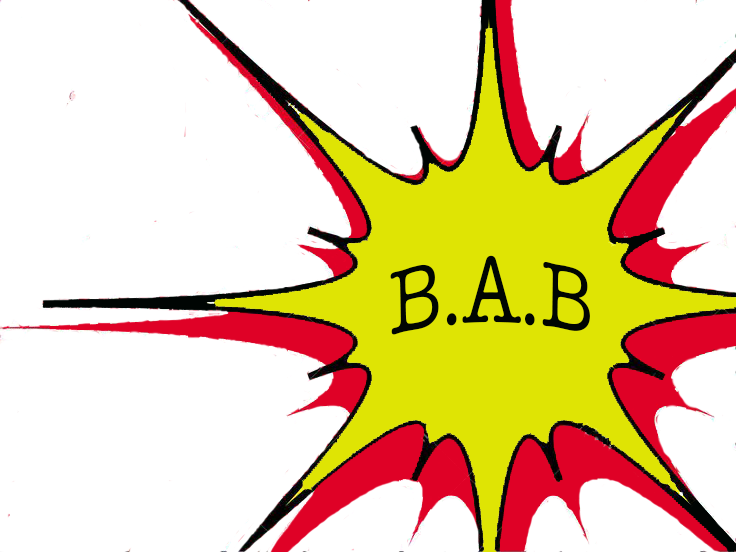
<style>
.page{position:relative;width:736px;height:552px;background:#ffffff}
.page>*{position:absolute;margin:0}
.t1{font:72px "AmericanTypewriter";color:#000502}
</style>
<div class="page">
<p class="t1" style="left:390px;top:255px;width:200px;height:80px">B.A.B</p>
</div>
